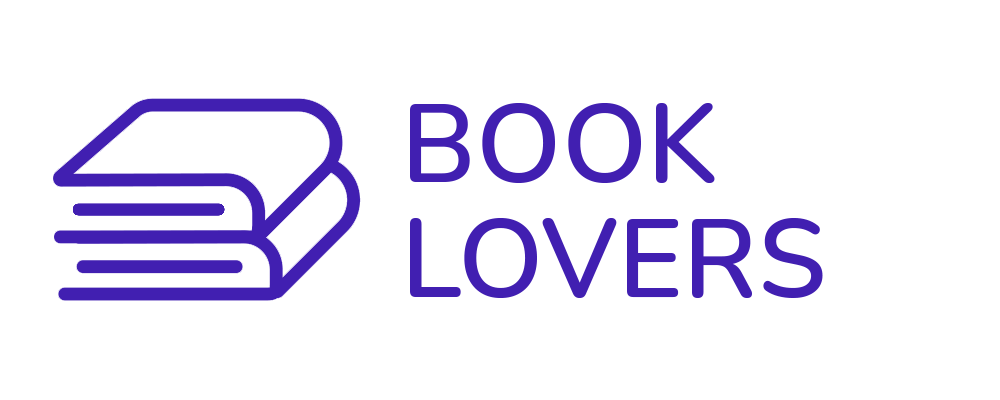
<style>
.page{position:relative;width:1000px;height:400px;background:#ffffff}
.page>*{position:absolute;margin:0}
.t1{font:110px "Nunito-SemiBold";color:#411fb1}
</style>
<div class="page">
<p class="t1" style="left:410px;top:103px;width:305px;height:80px">BOOK</p>
<p class="t1" style="left:410px;top:218px;width:413px;height:80px">LOVERS</p>
</div>
